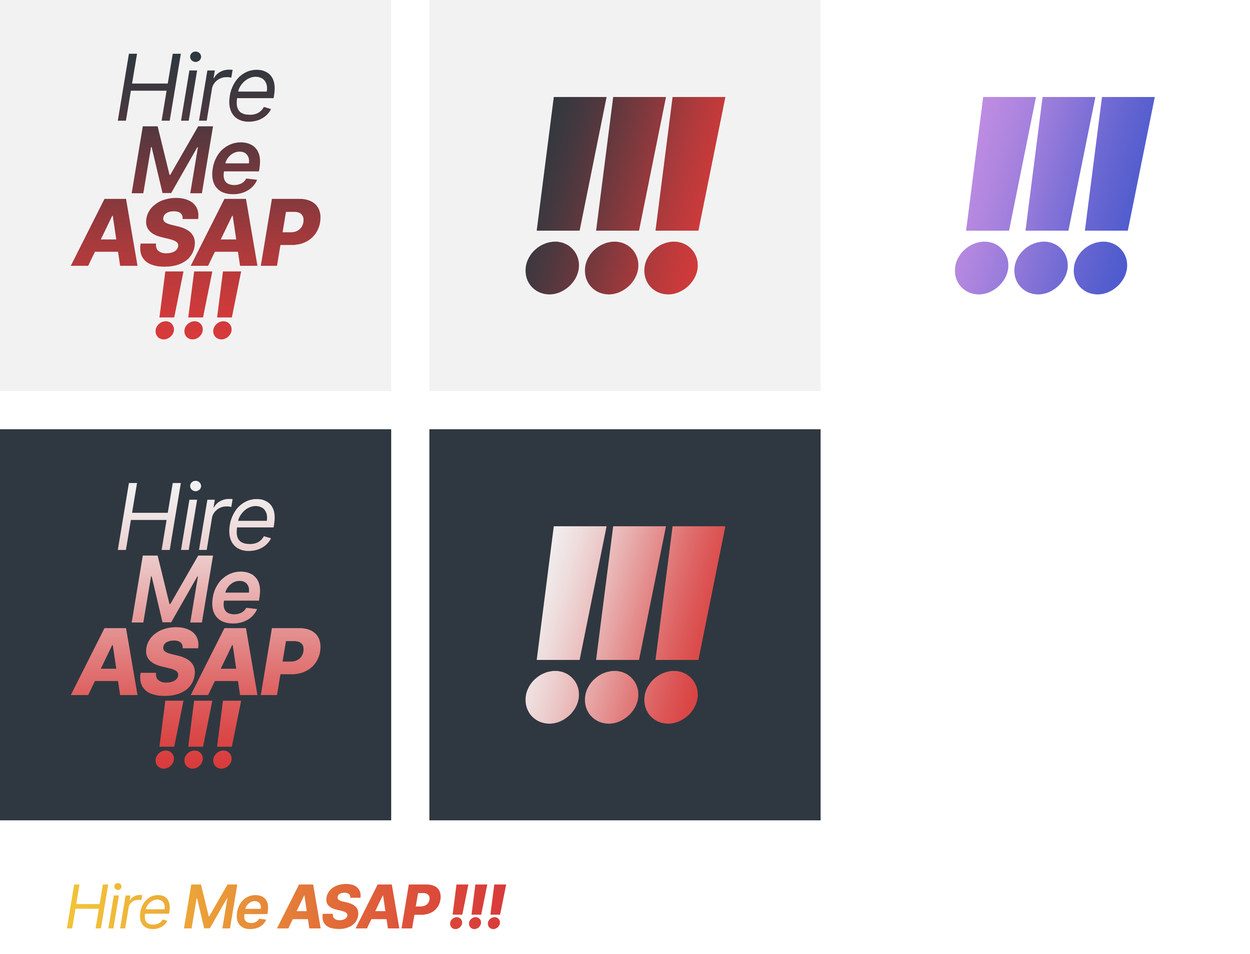
<style>
.page{position:relative;width:1250px;height:954px;background:#ffffff}
.page>*{position:absolute;margin:0}
.t1{font:92.1px/72.6px "Inter-Italic";letter-spacing:-0.042em}
.t2{font:92.1px/72.6px "Inter-SemiBoldItalic";letter-spacing:-0.042em}
.t3{font:92.1px/72.6px "Inter-ExtraBoldItalic";letter-spacing:-0.042em}
.t4{font:92.1px/72.6px "Inter-BlackItalic";letter-spacing:-0.042em}
.t5{font:267.4px "Inter-BlackItalic";letter-spacing:-0.133em}
.t6{font:60.3px "Inter-Italic";letter-spacing:-0.042em}
.t7{font:60.3px "Inter-SemiBoldItalic";letter-spacing:-0.042em}
.t8{font:60.3px "Inter-ExtraBoldItalic";letter-spacing:-0.042em}
.t9{font:60.3px "Inter-BlackItalic";letter-spacing:-0.042em}
</style>
<div class="page">
<p class="t1" style="left:71px;top:51px;width:252px;height:289px;text-align:center">Hire<br><span class="t2">Me<br></span><span class="t3">ASAP<br></span><span class="t4">!!!</span></p>
<p class="t5" style="left:525px;top:97px;width:200px;height:197px">!!!</p>
<p class="t5" style="left:955px;top:97px;width:200px;height:197px">!!!</p>
<p class="t1" style="left:71px;top:481px;width:252px;height:288px;text-align:center">Hire<br><span class="t2">Me<br></span><span class="t3">ASAP<br></span><span class="t4">!!!</span></p>
<p class="t5" style="left:525px;top:526px;width:200px;height:198px">!!!</p>
<p class="t6" style="left:67px;top:883px;width:439px;height:46px">Hire <span class="t7">Me </span><span class="t8">ASAP </span><span class="t9">!!!</span></p>
</div>
